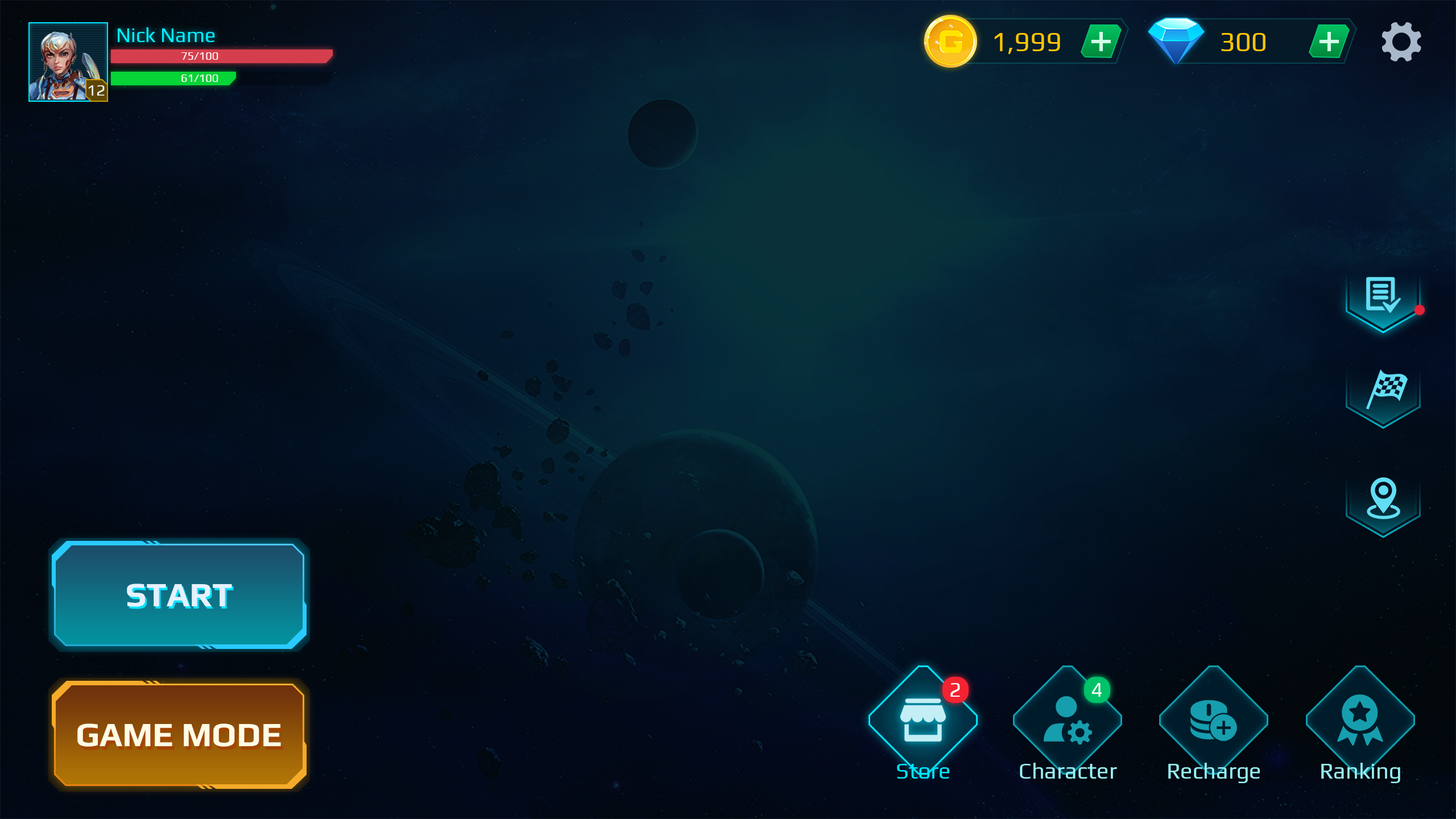
<style>
.page{position:relative;width:1456px;height:819px}
.page>*{position:absolute;margin:0}
.t1{font:20.5px "Play-Regular";color:#00f0ff}
.t2{font:27.3px "Play-Regular";color:#ffc600}
.t3{font:11.4px "Play-Regular";color:#ffffff}
.t4{font:15.9px "Play-Regular";color:#ffffff}
.t5{font:34.1px "Play-Bold";color:#e4f1ff}
.t6{font:20.5px "Play-Regular";color:#ffffff}
.t7{font:34.1px "Play-Bold";color:#fffbe4}
.t8{font:22.7px "Play-Regular";color:#00e4ff}
.t9{font:22.7px "Play-Regular";color:#99f1f7}
</style>
<div class="page">
<p class="t1" style="left:118px;top:27px;width:97px;height:15px">Nick Name</p>
<p class="t2" style="left:994px;top:33px;width:66px;height:21px">1,999</p>
<p class="t2" style="left:1221px;top:33px;width:44px;height:18px">300</p>
<p class="t3" style="left:181px;top:52px;width:37px;height:8px">75/100</p>
<p class="t3" style="left:181px;top:75px;width:37px;height:7px">61/100</p>
<p class="t4" style="left:88px;top:85px;width:17px;height:11px">12</p>
<p class="t5" style="left:127px;top:584px;width:105px;height:23px">START</p>
<p class="t6" style="left:950px;top:683px;width:10px;height:14px">2</p>
<p class="t6" style="left:1091px;top:683px;width:11px;height:14px">4</p>
<p class="t7" style="left:77px;top:723px;width:204px;height:24px">GAME MODE</p>
<p class="t8" style="left:897px;top:764px;width:52px;height:15px">Store</p>
<p class="t9" style="left:1020px;top:763px;width:97px;height:16px">Character</p>
<p class="t9" style="left:1168px;top:763px;width:92px;height:20px">Recharge</p>
<p class="t9" style="left:1321px;top:763px;width:79px;height:20px">Ranking</p>
</div>
